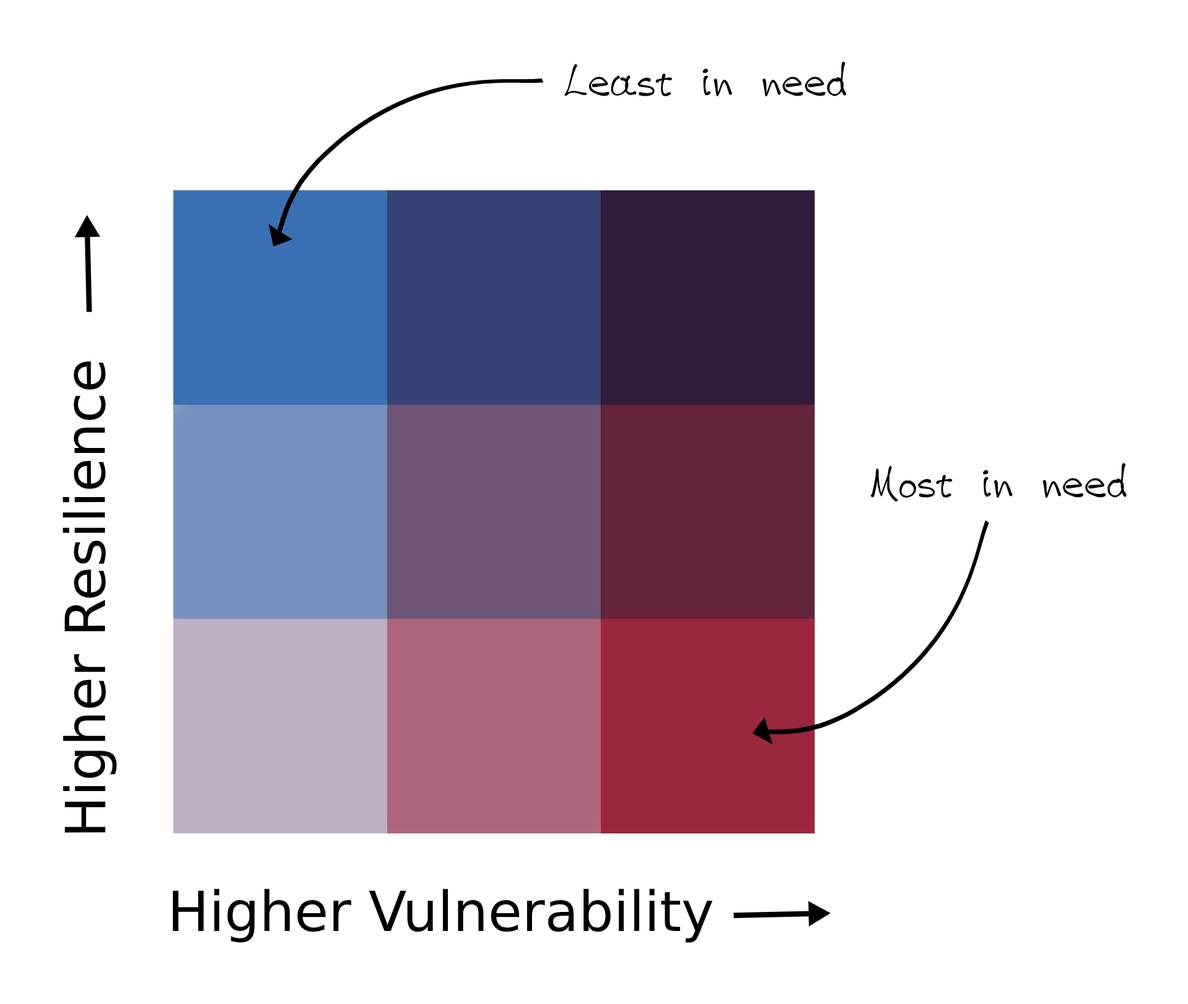
<style>
.page{position:relative;width:1188px;height:1004px;background:#ffffff}
.page>*{position:absolute;margin:0}
.t1{font:55.2px "VAG-HandWritten";color:#000000}
.t2{font:55.2px "DejaVuSans";color:#000000}
</style>
<div class="page">
<p class="t1" style="left:564px;top:61px;width:283px;height:38px">Least in need</p>
<p class="t2" style="left:63px;top:361px;width:54px;height:472px;rotate:-90deg">Higher Resilience</p>
<p class="t1" style="left:870px;top:462px;width:258px;height:40px">Most in need</p>
<p class="t2" style="left:172px;top:888px;width:540px;height:54px">Higher Vulnerability</p>
</div>
